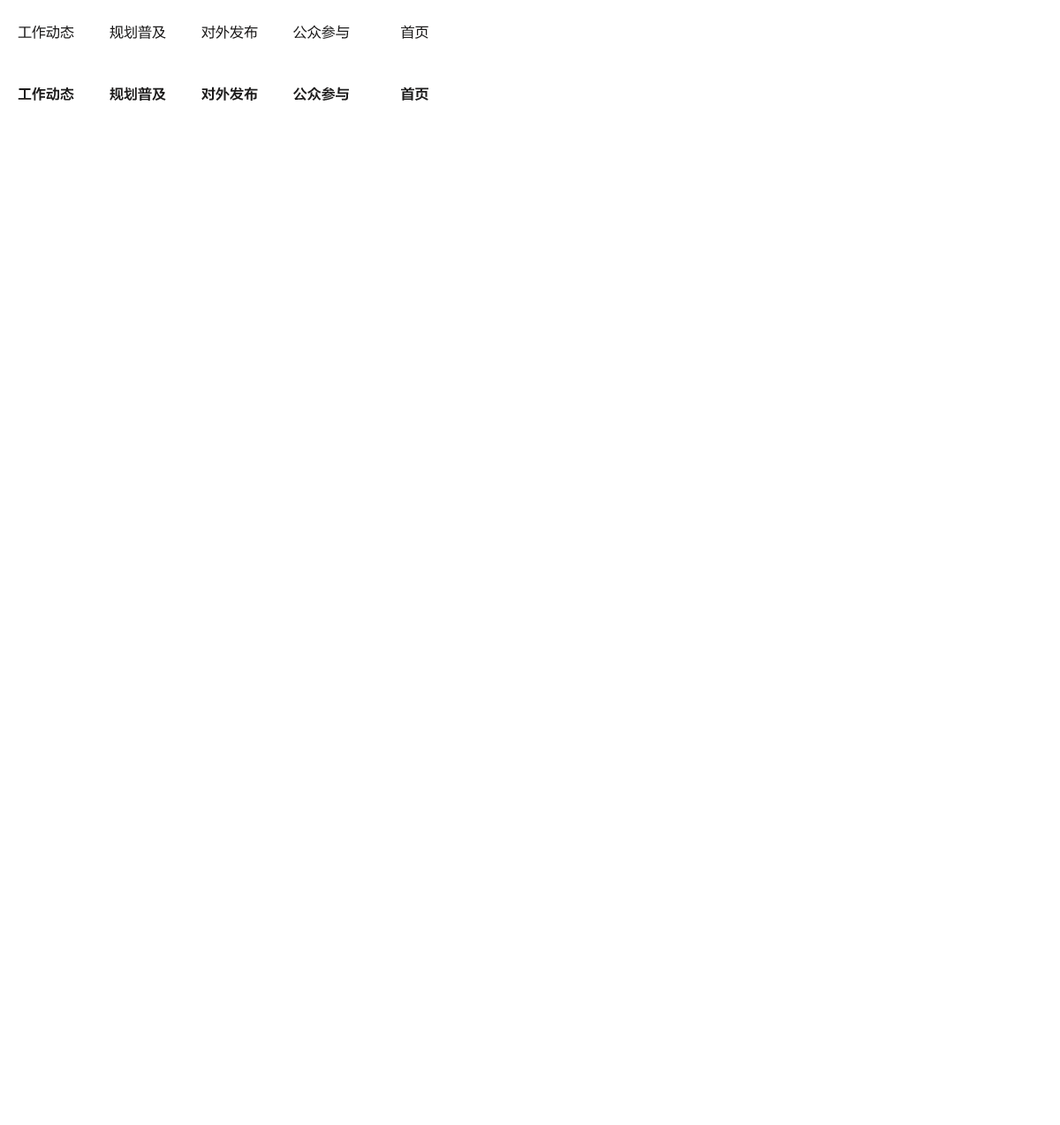
<style>
.page{position:relative;width:1060px;height:1125px;background:#ffffff}
.page>*{position:absolute;margin:0}
.t1{font:14.1px "FZLTHK--GBK1-0";color:#1d1c1c;text-transform:uppercase}
.t2{font:14.1px "FZLTZCHK--GBK1-0";color:#1d1c1c;text-transform:uppercase}
</style>
<div class="page">
<p class="t1" style="left:18px;top:25px;width:410px;height:14px">工作动态         规划普及         对外发布         公众参与             首页</p>
<p class="t2" style="left:18px;top:87px;width:410px;height:14px">工作动态         规划普及         对外发布         公众参与             首页</p>
</div>
